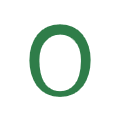
<style>
.page{position:relative;width:120px;height:120px;background:#ffffff}
.page>*{position:absolute;margin:0}
.t1{font:160px "Buda-Light";color:#2f7d49}
</style>
<div class="page">
<p class="t1" style="left:30px;top:25px;width:60px;height:71px">o</p>
</div>
